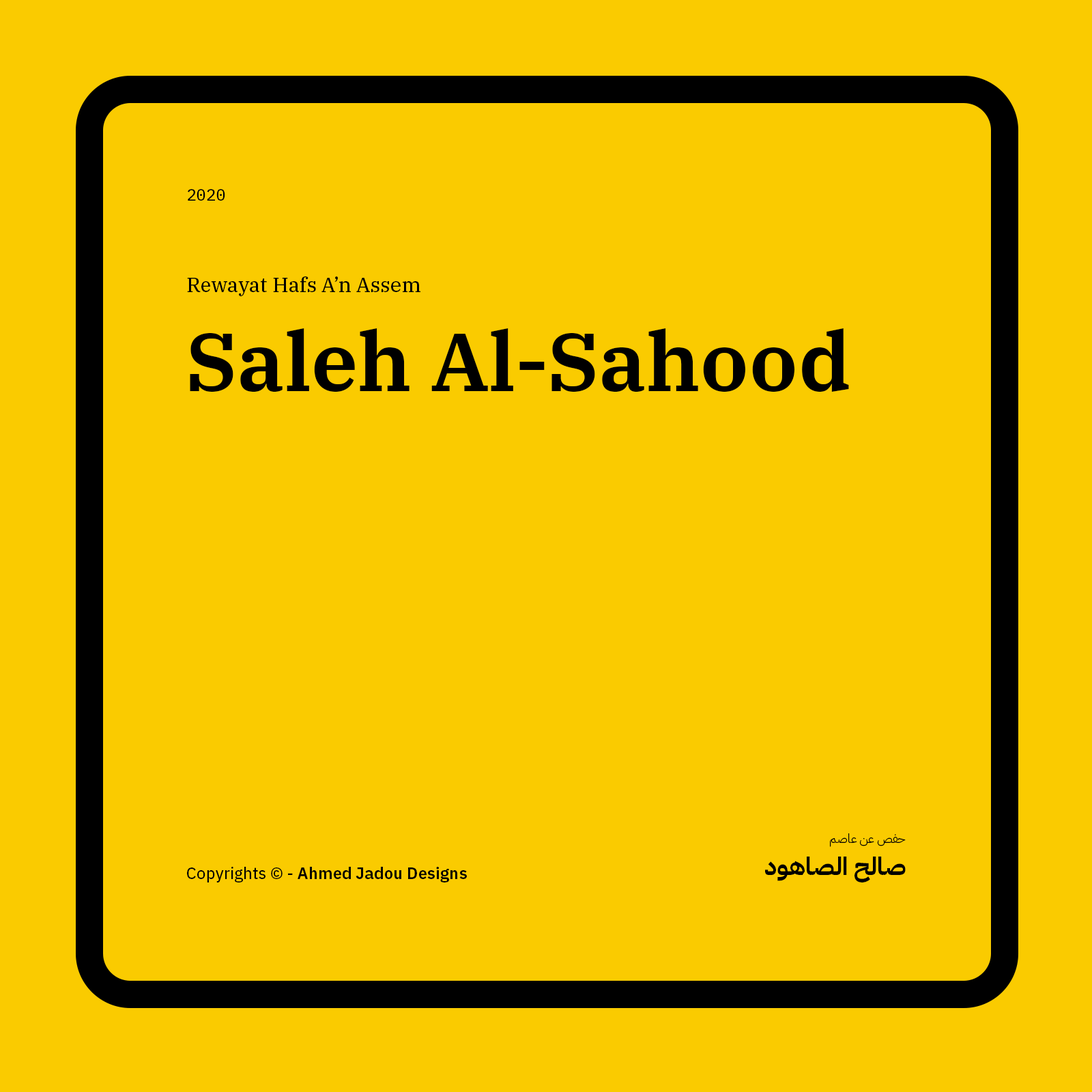
<style>
.page{position:relative;width:1092px;height:1092px;background:#facb00}
.page>*{position:absolute;margin:0}
.t1{font:16.4px "IBMPlexMono-Text";color:#000000}
.t2{font:20.5px "IBMPlexSerif-Text";color:#000000}
.t3{font:81.9px "IBMPlexSerif-SemiBold";color:#000000}
.t4{font:12.3px "IBMPlexArabic-Light";color:#000000}
.t5{font:24.6px "IBMPlexArabic-Bold";color:#000000}
.t6{font:16.4px "IBMPlexSans-SemiBold";color:#000000}
.t7{font:16.4px "IBMPlexSans-Text";color:#000000}
</style>
<div class="page">
<p class="t1" style="left:188px;top:189px;width:37px;height:12px">2020</p>
<p class="t2" style="left:187px;top:276px;width:233px;height:20px">Rewayat Hafs A’n Assem</p>
<p class="t3" style="left:190px;top:328px;width:659px;height:64px">Saleh Al-Sahood</p>
<p class="t4" style="left:830px;top:833px;width:76px;height:14px">حفص عن عاصم</p>
<p class="t5" style="left:765px;top:857px;width:141px;height:25px">صالح الصاهود</p>
<p class="t6" style="left:187px;top:867px;width:280px;height:15px"><span class="t7">Copyrights © - </span>Ahmed Jadou Designs</p>
</div>
